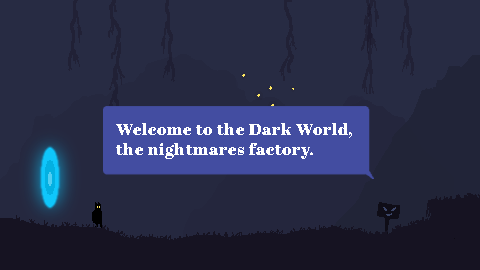
<style>
.page{position:relative;width:480px;height:270px;background:#272b43}
.page>*{position:absolute;margin:0}
.t1{font:16.2px "AbrilFatface-Regular";letter-spacing:0.025em;color:#ffffff;scale:1.08 1}
</style>
<div class="page">
<p class="t1" style="left:116px;top:123px;width:236px;height:36px">Welcome to the Dark World, the nightmares factory.</p>
</div>
